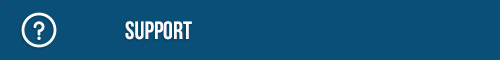
<style>
.page{position:relative;width:500px;height:60px;background:#094f77}
.page>*{position:absolute;margin:0}
.t1{font:25px "UTM-Bebas";color:#ffffff}
</style>
<div class="page">
<p class="t1" style="left:125px;top:21px;width:67px;height:19px">support</p>
</div>
